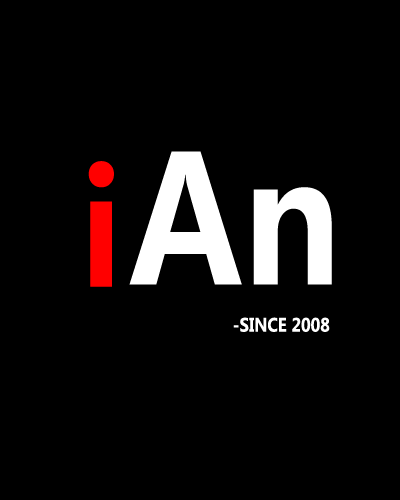
<style>
.page{position:relative;width:400px;height:500px;background:#000000}
.page>*{position:absolute;margin:0}
.t1{font:157.6px "MicrosoftYaHei-Bold";color:#ff0000;scale:0.87 1}
.t2{font:175.3px "MicrosoftYaHei-Bold";color:#ffffff;scale:0.87 1}
.t3{font:18px "MicrosoftYaHei-Bold";color:#ffffff;scale:0.87 1}
</style>
<div class="page">
<p class="t1" style="left:88px;top:161px;width:26px;height:126px">i</p>
<p class="t2" style="left:129px;top:151px;width:203px;height:134px">An</p>
<p class="t3" style="left:233px;top:317px;width:97px;height:15px">-SINCE 2008</p>
</div>
